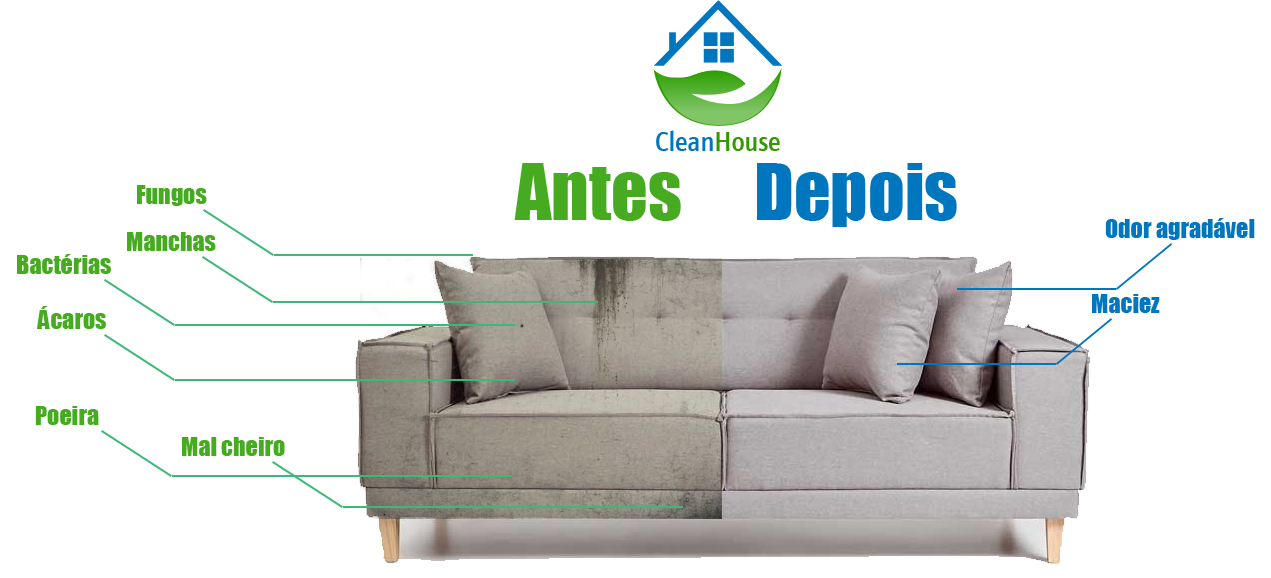
<style>
.page{position:relative;width:1271px;height:578px;background:#ffffff}
.page>*{position:absolute;margin:0}
.t1{font:72px "Impact";color:#46ab20}
.t2{font:72px "Impact";color:#0076be}
.t3{font:24px "Impact";color:#46ab20}
.t4{font:24px "Impact";color:#0076be}
</style>
<div class="page">
<p class="t1" style="left:514px;top:163px;width:167px;height:58px">Antes</p>
<p class="t2" style="left:757px;top:163px;width:200px;height:64px">Depois</p>
<p class="t3" style="left:137px;top:185px;width:70px;height:21px">Fungos</p>
<p class="t4" style="left:1105px;top:218px;width:150px;height:22px">Odor agradável</p>
<p class="t3" style="left:127px;top:232px;width:89px;height:19px">Manchas</p>
<p class="t3" style="left:17px;top:254px;width:94px;height:20px">Bactérias</p>
<p class="t4" style="left:1092px;top:294px;width:68px;height:19px">Maciez</p>
<p class="t3" style="left:37px;top:306px;width:69px;height:23px">Ácaros</p>
<p class="t3" style="left:35px;top:406px;width:64px;height:19px">Poeira</p>
<p class="t3" style="left:182px;top:437px;width:103px;height:19px">Mal cheiro</p>
</div>
